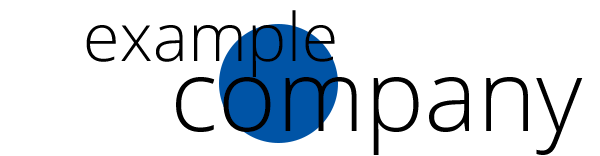
<style>
.page{position:relative;width:600px;height:156px;background:#ffffff}
.page>*{position:absolute;margin:0}
.t1{font:66.7px "OpenSans-Light";color:#000000}
.t2{font:100px "OpenSans-Light";color:#000000}
</style>
<div class="page">
<p class="t1" style="left:86px;top:10px;width:249px;height:67px">example</p>
<p class="t2" style="left:176px;top:77px;width:407px;height:78px">company</p>
</div>
